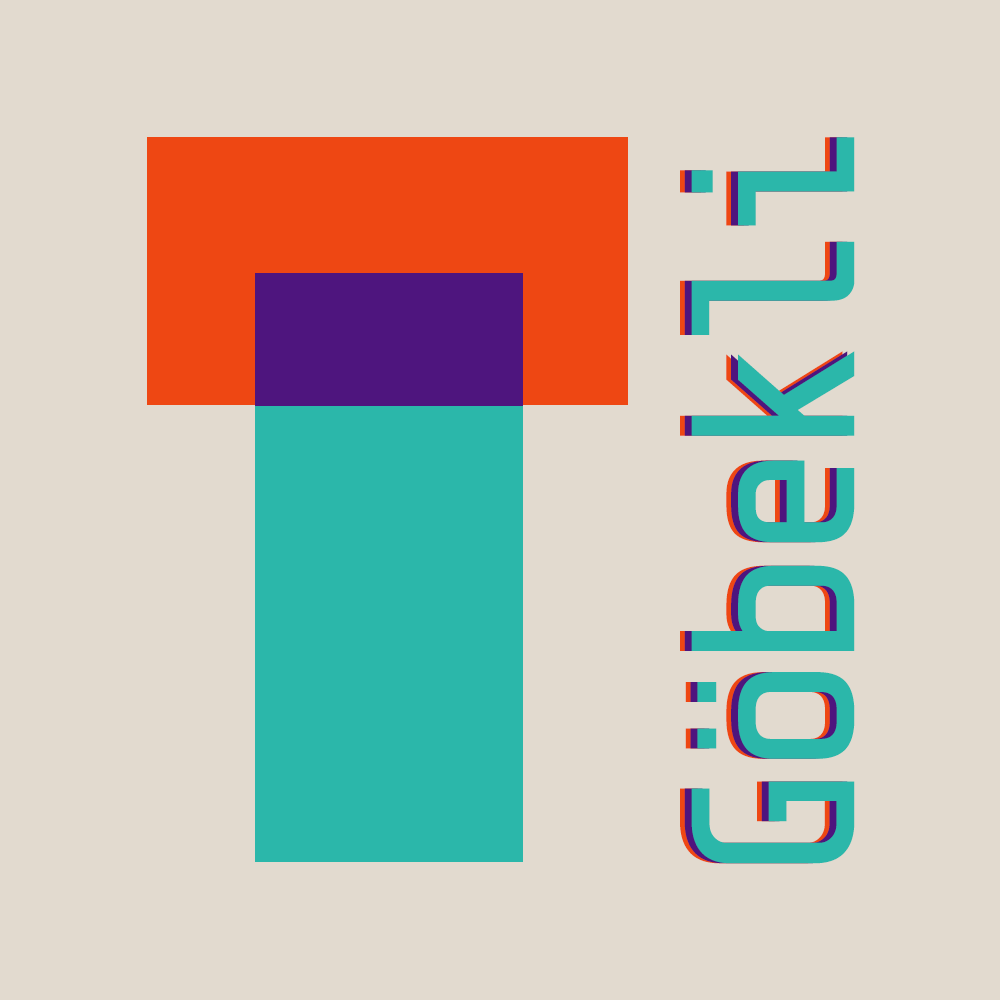
<style>
.page{position:relative;width:1000px;height:1000px;background:#e2dacf}
.page>*{position:absolute;margin:0}
.t1{font:232.1px "ShareTechMono-Regular";letter-spacing:-0.08em;color:#2bb7aa}
</style>
<div class="page">
<p class="t1" style="left:680px;top:137px;width:163px;height:727px;rotate:-90deg">Göbekli</p>
<p class="t1" style="left:684px;top:137px;width:164px;height:727px;rotate:-90deg">Göbekli</p>
<p class="t1" style="left:691px;top:137px;width:164px;height:727px;rotate:-90deg">Göbekli</p>
</div>
